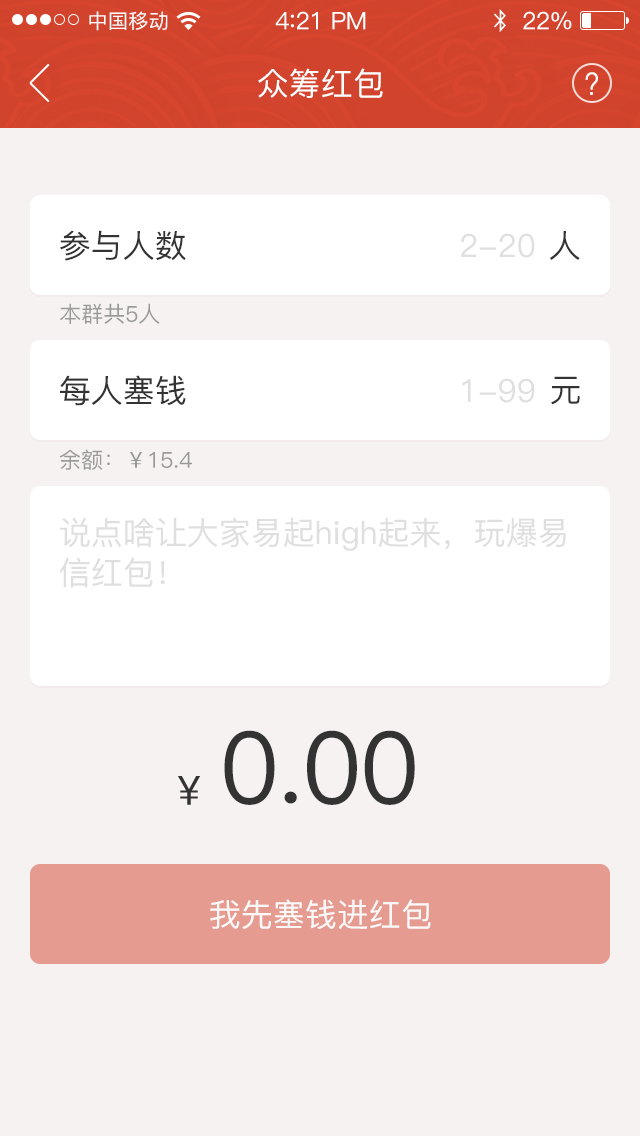
<style>
.page{position:relative;width:640px;height:1136px;background:#f7f2f2}
.page>*{position:absolute;margin:0}
.t1{font:20px "PingFang-SC-Medium";letter-spacing:0.02em;color:#ffffff}
.t2{font:24px "PingFang-SC-Medium";letter-spacing:-0.02em;color:#ffffff}
.t3{font:26px "PingFang-SC-Medium";letter-spacing:-0.02em;color:#ffffff}
.t4{font:32px "PingFang-SC-Medium";color:#ffffff}
.t5{font:32px "PingFang-SC-Medium";color:#333333}
.t6{font:32px "PingFang-SC-Medium";color:#dfdfdf}
.t7{font:22px "PingFang-SC-Medium";color:#999999}
.t8{font:32px/40px "PingFang-SC-Medium";color:#dfdfdf}
.t9{font:100px "PingFang-SC-Medium";letter-spacing:-0.02em;color:#333333}
.t10{font:40.1px "PingFangSC-Regular";color:#333333}
</style>
<div class="page">
<p class="t1" style="left:89px;top:11px;width:79px;height:20px">中国移动</p>
<p class="t2" style="left:275px;top:11px;width:91px;height:19px">4<span class="t3">:</span>21 PM</p>
<p class="t2" style="left:523px;top:11px;width:49px;height:19px">22%</p>
<p class="t4" style="left:258px;top:68px;width:125px;height:30px">众筹红包</p>
<p class="t5" style="left:60px;top:230px;width:126px;height:31px">参与人数</p>
<p class="t6" style="left:461px;top:233px;width:74px;height:25px">2-20</p>
<p class="t5" style="left:550px;top:231px;width:30px;height:29px">人</p>
<p class="t7" style="left:60px;top:303px;width:100px;height:21px">本群共5人</p>
<p class="t5" style="left:60px;top:375px;width:126px;height:31px">每人塞钱</p>
<p class="t5" style="left:551px;top:376px;width:29px;height:29px">元</p>
<p class="t6" style="left:462px;top:378px;width:73px;height:25px">1-99</p>
<p class="t7" style="left:59px;top:449px;width:133px;height:21px">余额：￥15.4</p>
<p class="t8" style="left:59px;top:517px;width:507px;height:71px">说点啥让大家易起high起来，玩爆易<br>信红包！</p>
<p class="t9" style="left:224px;top:730px;width:191px;height:75px">0.00</p>
<p class="t10" style="left:178px;top:776px;width:22px;height:29px">¥</p>
<p class="t4" style="left:210px;top:899px;width:221px;height:31px">我先塞钱进红包</p>
</div>
